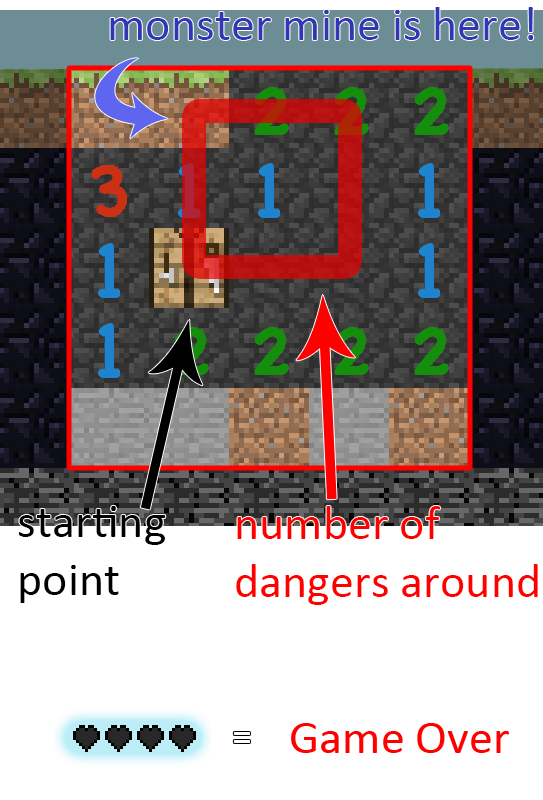
<style>
.page{position:relative;width:543px;height:800px;background:#ffffff}
.page>*{position:absolute;margin:0}
.t1{font:48px "Calibri";color:#3036b6}
.t2{font:48px "Calibri";color:#000000}
.t3{font:48px "Calibri";color:#ff0000}
</style>
<div class="page">
<p class="t1" style="left:110px;top:7px;width:424px;height:33px">monster mine is here!</p>
<p class="t2" style="left:18px;top:506px;width:148px;height:97px">starting <br>point</p>
<p class="t3" style="left:236px;top:506px;width:302px;height:99px">number of <br>dangers around</p>
<p class="t3" style="left:291px;top:723px;width:218px;height:30px">Game Over</p>
</div>
